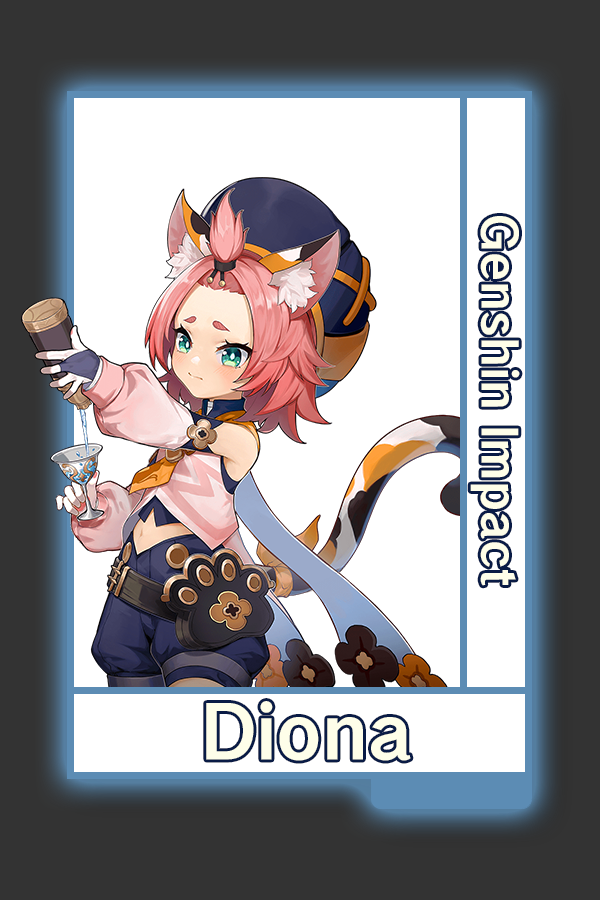
<style>
.page{position:relative;width:600px;height:900px;background:#ffffff}
.page>*{position:absolute;margin:0}
.t1{font:48.8px "HYWenHei-HEW";color:#fefef4}
.t2{font:75px "HYWenHei-HEW";color:#fefef4}
</style>
<div class="page">
<p class="t1" style="left:470px;top:216px;width:50px;height:370px;rotate:90deg">Genshin Impact</p>
<p class="t2" style="left:206px;top:701px;width:205px;height:60px">Diona</p>
</div>
